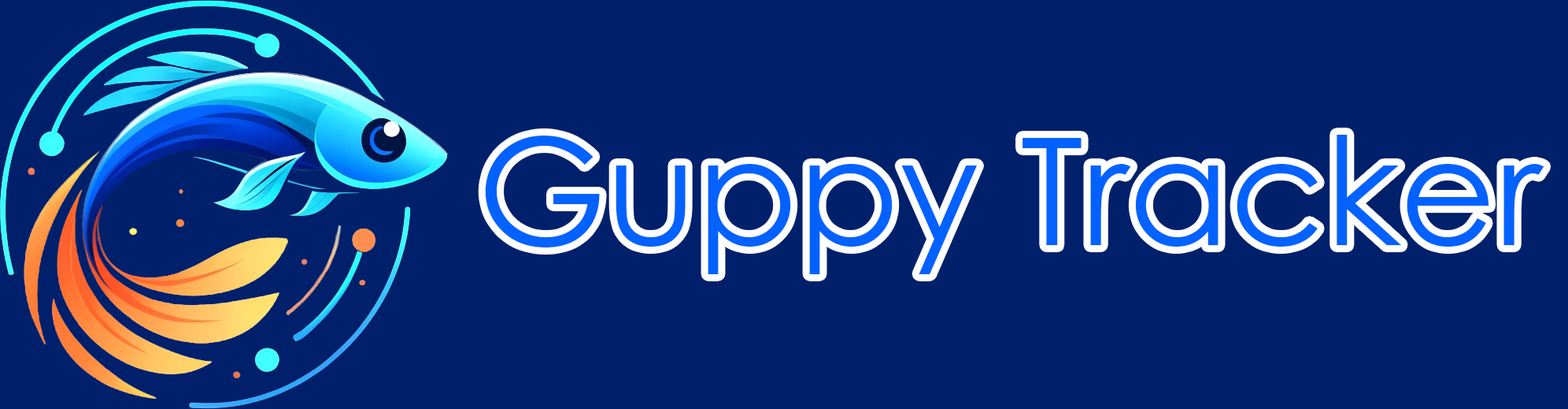
<style>
.page{position:relative;width:1568px;height:409px;background:#00206b}
.page>*{position:absolute;margin:0}
.t1{font:149.7px "CenturyGothic";color:#0362fe}
</style>
<div class="page">
<p class="t1" style="left:485px;top:135px;width:1059px;height:139px">Guppy Tracker</p>
</div>
